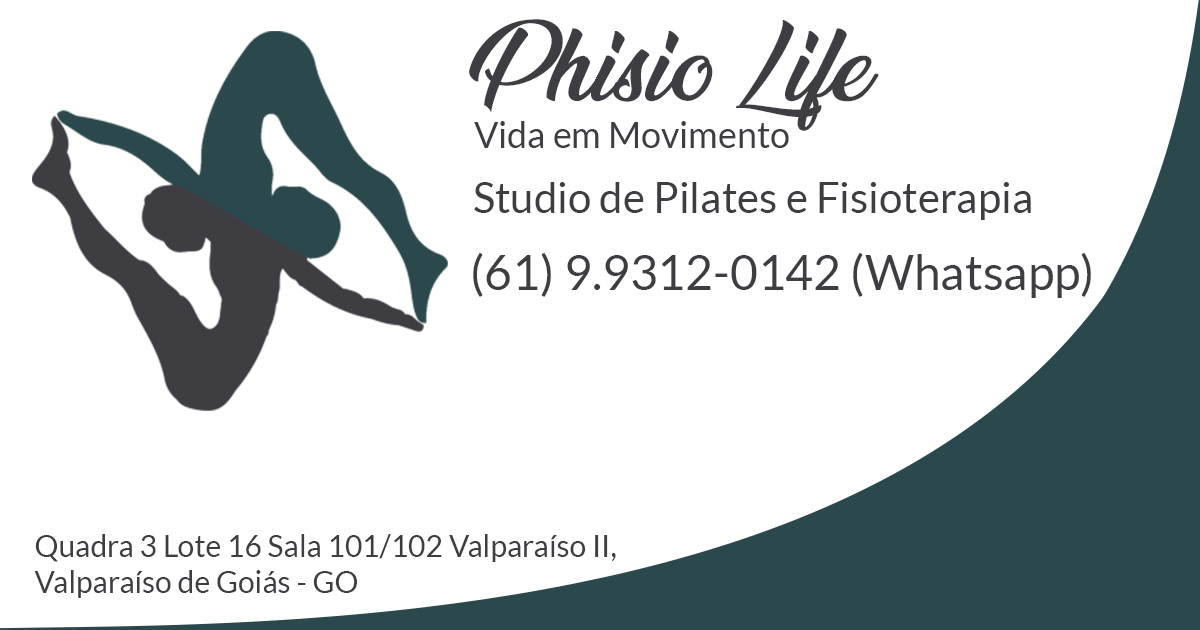
<style>
.page{position:relative;width:1200px;height:630px;background:#ffffff}
.page>*{position:absolute;margin:0}
.t1{font:90px "Untitled1";color:#3e3d42}
.t2{font:36px "Lato-Regular";color:#3e3d42}
.t3{font:42px "Lato-Regular";color:#3e3d42}
.t4{font:48px "Lato-Regular";color:#3e3d42}
.t5{font:30px "Lato-Regular";color:#3e3d42}
</style>
<div class="page">
<p class="t1" style="left:469px;top:19px;width:410px;height:112px">Phisio Life</p>
<p class="t2" style="left:474px;top:121px;width:315px;height:27px">Vida em Movimento</p>
<p class="t3" style="left:474px;top:182px;width:557px;height:38px">Studio de Pilates e Fisioterapia</p>
<p class="t4" style="left:473px;top:252px;width:618px;height:46px">(61) 9.9312-0142 (Whatsapp)</p>
<p class="t5" style="left:34px;top:534px;width:582px;height:64px">Quadra 3 Lote 16 Sala 101/102 Valparaíso II, <br>Valparaíso de Goiás - GO</p>
</div>
